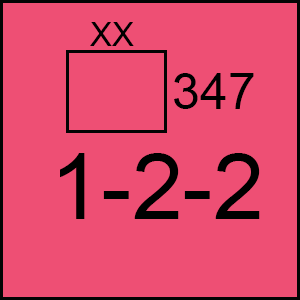
<style>
.page{position:relative;width:300px;height:300px;background:#ee4f74}
.page>*{position:absolute;margin:0}
.t1{font:33.3px "ArialMT";color:#000000}
.t2{font:50px "ArialMT";color:#000000}
.t3{font:91.7px "ArialMT";color:#000000}
</style>
<div class="page">
<p class="t1" style="left:90px;top:22px;width:44px;height:24px">XX</p>
<p class="t2" style="left:174px;top:73px;width:80px;height:36px">347</p>
<p class="t3" style="left:60px;top:153px;width:200px;height:66px">1-2-2</p>
</div>
